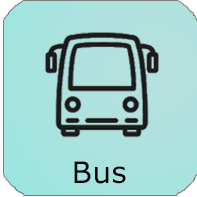
<style>
.page{position:relative;width:197px;height:197px}
.page>*{position:absolute;margin:0}
.t1{font:29.4px "Verdana";letter-spacing:0.025em;color:#000000}
</style>
<div class="page">
<p class="t1" style="left:74px;top:161px;width:52px;height:23px">Bus</p>
</div>
